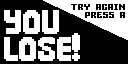
<style>
.page{position:relative;width:128px;height:64px;background:#000000}
.page>*{position:absolute;margin:0}
.t1{font:16.9px "Gamer";letter-spacing:-0.02em;color:#000000}
.t2{font:32.3px "Big-Apple-3PM";color:#fefefe}
</style>
<div class="page">
<p class="t1" style="left:71px;top:4px;width:54px;height:14px;text-align:right">TRY AGAIN<br><br>PRESS A</p>
<p class="t2" style="left:4px;top:10px;width:76px;height:51px">YOU<br>LOSE!</p>
</div>
